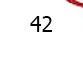
<style>
.page{position:relative;width:83px;height:70px;background:#ffffff}
.page>*{position:absolute;margin:0}
.t1{font:21px "Tahoma";color:#000000}
</style>
<div class="page">
<p class="t1" style="left:30px;top:16px;width:23px;height:16px">42</p>
</div>
